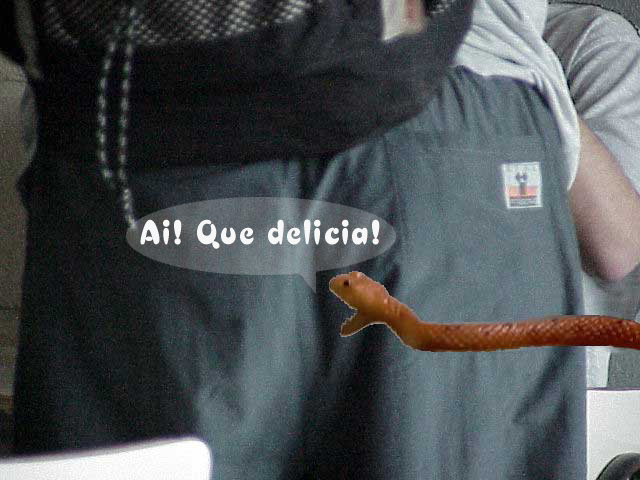
<style>
.page{position:relative;width:640px;height:480px}
.page>*{position:absolute;margin:0}
.t1{font:36px "CroissantD";letter-spacing:0.05em;color:#ffffff}
</style>
<div class="page">
<p class="t1" style="left:140px;top:219px;width:240px;height:30px">Ai! Que delicia!</p>
</div>
